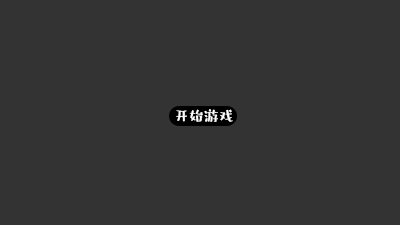
<style>
.page{position:relative;width:400px;height:225px;background:#333333}
.page>*{position:absolute;margin:0}
.t1{font:15px "FZZJ-QNTJW--GB1-0";color:#ffffff}
</style>
<div class="page">
<p class="t1" style="left:176px;top:109px;width:57px;height:13px">开始游戏</p>
</div>
